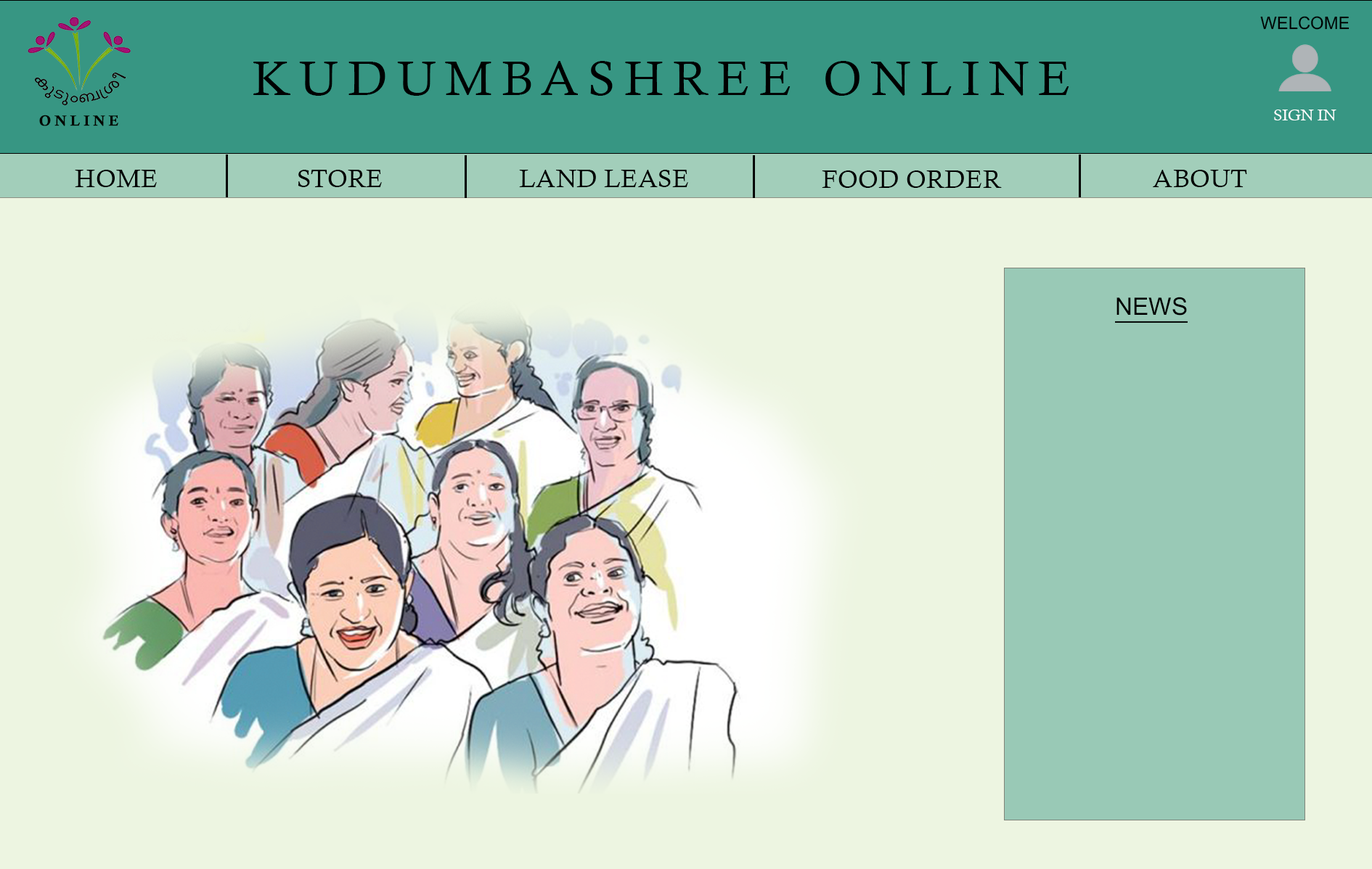
<style>
.page{position:relative;width:1372px;height:869px;background:#edf5e1}
.page>*{position:absolute;margin:0}
.t1{font:17.3px "AksharUnicode";color:#000000}
.t2{font:48.4px "CalistoMT";letter-spacing:0.2em;color:#000000}
.t3{font:15.6px "CalistoMT";color:#ffffff;text-transform:uppercase}
.t4{font:14.6px "CalisMTBol";letter-spacing:0.26em;color:#040600}
.t5{font:25.7px "CalistoMT";color:#000000;text-transform:uppercase}
.t6{font:24.2px "AksharUnicode";color:#000000;text-transform:uppercase;text-decoration:underline}
</style>
<div class="page">
<p class="t1" style="left:1260px;top:16px;width:89px;height:14px">WELCOME</p>
<p class="t2" style="left:253px;top:61px;width:816px;height:35px">KUDUMBASHREE ONLINE</p>
<p class="t3" style="left:1274px;top:110px;width:62px;height:11px">Sign in</p>
<p class="t4" style="left:39px;top:115px;width:79px;height:11px">ONLINE</p>
<p class="t5" style="left:75px;top:170px;width:82px;height:17px">home</p>
<p class="t5" style="left:298px;top:170px;width:84px;height:17px">store</p>
<p class="t5" style="left:519px;top:170px;width:169px;height:18px">land lease</p>
<p class="t5" style="left:821px;top:171px;width:180px;height:17px">food order</p>
<p class="t5" style="left:1152px;top:170px;width:95px;height:17px">about</p>
<p class="t6" style="left:1115px;top:297px;width:72px;height:26px">NEWS</p>
</div>
